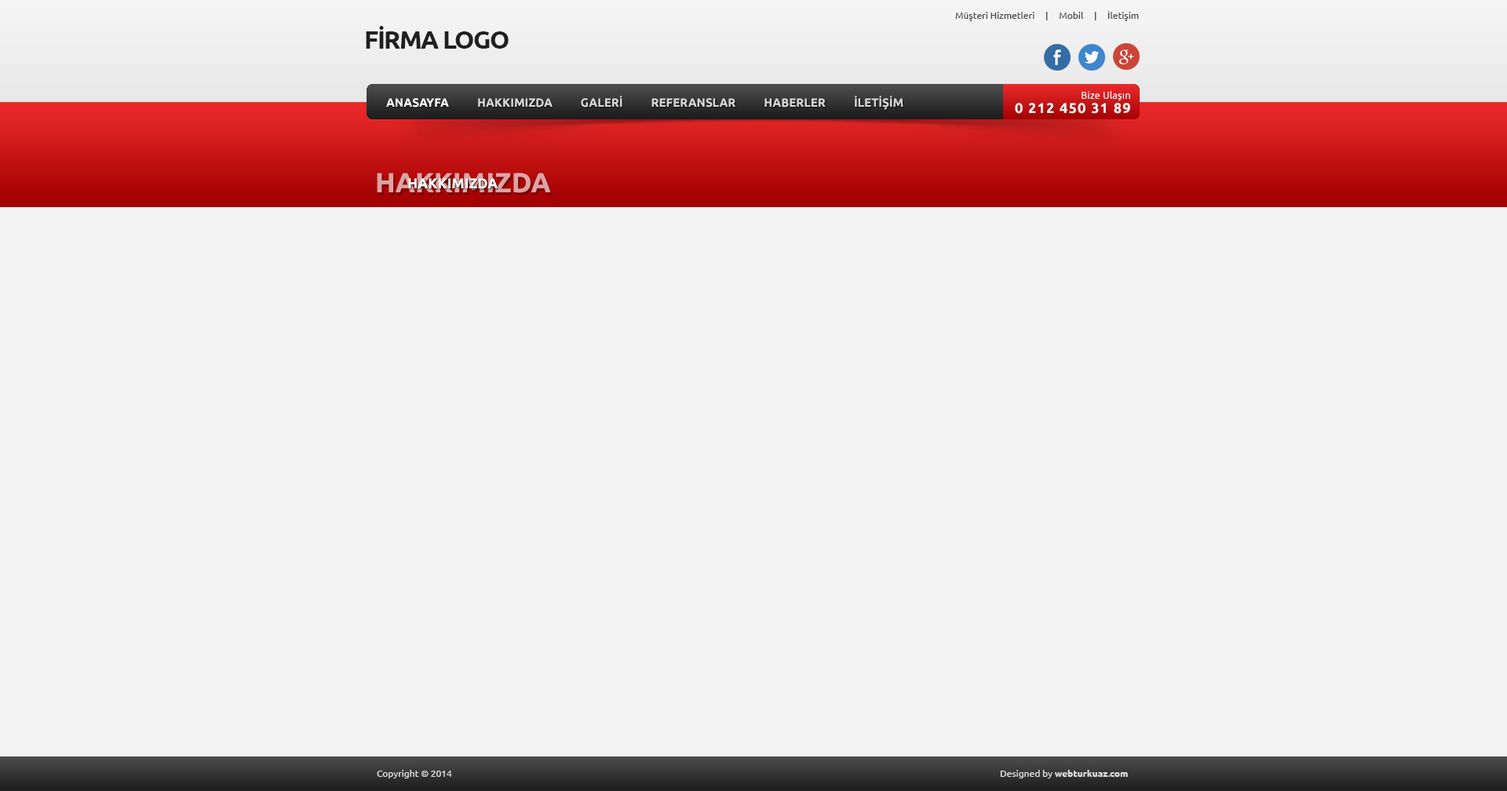
<style>
.page{position:relative;width:1507px;height:791px;background:#f3f3f3}
.page>*{position:absolute;margin:0}
.t1{font:9.4px "Ubuntu";color:#4e4949}
.t2{font:25.1px "Ubuntu-Bold";letter-spacing:-0.05em;color:#202020}
.t3{font:11.8px "Ubuntu-Bold";color:#d8d8d8;text-transform:uppercase}
.t4{font:11.8px "Ubuntu-Bold";color:#ffffff;text-transform:uppercase}
.t5{font:10.2px "Ubuntu";color:#f3f3f3}
.t6{font:14.1px "Ubuntu-Bold";letter-spacing:0.07em;color:#f3f3f3}
.t7{font:27.5px "Ubuntu-Bold";color:#daa5a5}
.t8{font:14.1px "Ubuntu-Bold";color:#ffffff}
.t9{font:9.4px "Ubuntu";color:#dcdcdc}
.t10{font:9.4px "Ubuntu-Bold";color:#dcdcdc}
</style>
<div class="page">
<p class="t1" style="left:955px;top:11px;width:184px;height:10px">Müşteri Hizmetleri     |     Mobil     |     İletişim</p>
<p class="t2" style="left:366px;top:26px;width:143px;height:23px">FİRMA LOGO</p>
<p class="t3" style="left:386px;top:96px;width:517px;height:14px"><span class="t4">Anasayfa</span>          hakkımızda          galerİ          referanslar          haberler          İletİşİm</p>
<p class="t5" style="left:1082px;top:91px;width:48px;height:10px">Bize Ulaşın</p>
<p class="t6" style="left:1015px;top:103px;width:115px;height:11px">0 212 450 31 89</p>
<p class="t7" style="left:377px;top:173px;width:174px;height:20px">HAKKIMIZDA</p>
<p class="t8" style="left:408px;top:178px;width:90px;height:11px">HAKKIMIZDA</p>
<p class="t9" style="left:377px;top:770px;width:75px;height:9px">Copyright © 2014</p>
<p class="t10" style="left:1000px;top:770px;width:128px;height:9px"><span class="t9">Designed by </span>webturkuaz.com</p>
</div>
